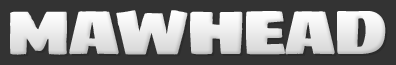
<style>
.page{position:relative;width:396px;height:65px;background:#333333}
.page>*{position:absolute;margin:0}
.t1{font:64px "Sigmar-Regular";color:#e9e9e9}
</style>
<div class="page">
<p class="t1" style="left:10px;top:10px;width:376px;height:45px">MAWHEAD</p>
</div>
